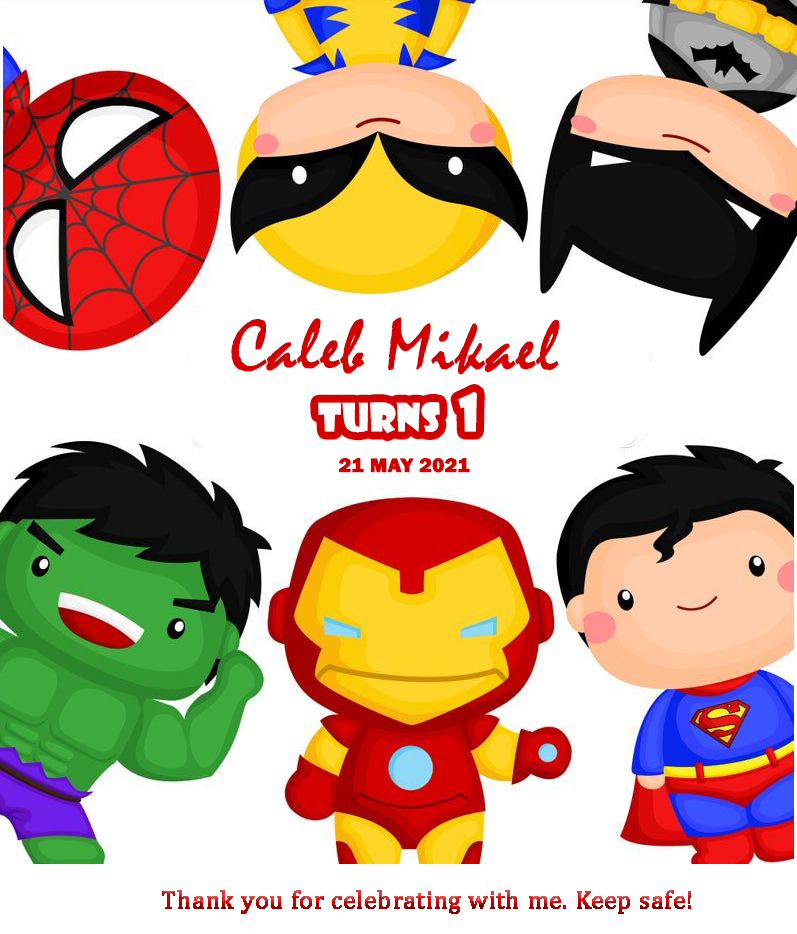
<style>
.page{position:relative;width:797px;height:934px;background:#ffffff}
.page>*{position:absolute;margin:0}
.t1{font:75px "Mistral";color:#d20001;font-weight:bold}
.t2{font:37.5px "ShowcardGothic-Reg";color:#fffdfd;font-weight:bold}
.t3{font:50px "ShowcardGothic-Reg";color:#fffdfd;font-weight:bold}
.t4{font:20.8px "FranklinGothic-Heavy";color:#d20001;font-weight:bold}
.t5{font:25px "Cambria";font-weight:bold}
</style>
<div class="page">
<p class="t1" style="left:231px;top:317px;width:329px;height:58px">Caleb Mikael</p>
<p class="t2" style="left:318px;top:391px;width:159px;height:43px">turns  <span class="t3">1</span></p>
<p class="t4" style="left:339px;top:458px;width:131px;height:15px">21 MAY 2021</p>
<p class="t5" style="left:162px;top:890px;width:529px;height:24px">Thank you for celebrating with me. Keep safe!</p>
</div>
